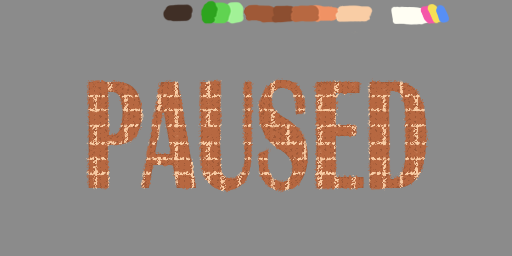
<style>
.page{position:relative;width:512px;height:256px;background:#8b8b8b}
.page>*{position:absolute;margin:0}
.t1{font:158.5px "BritannicBold";color:#9f5937;scale:0.63 1}
</style>
<div class="page">
<p class="t1" style="left:88px;top:80px;width:339px;height:110px">PAUSED</p>
</div>
